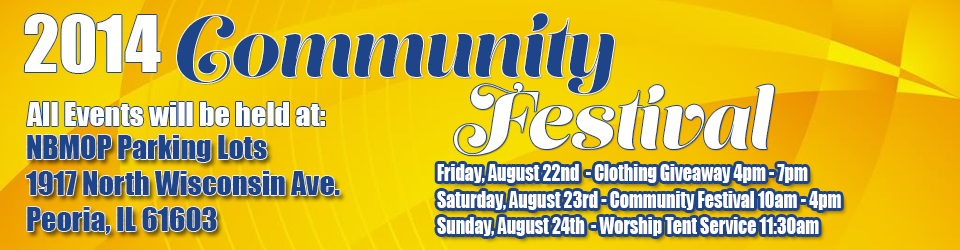
<style>
.page{position:relative;width:960px;height:250px}
.page>*{position:absolute;margin:0}
.t1{font:72px "Impact";color:#ffffff}
.t2{font:80px "LustScript";color:#1e4489}
.t3{font:80px "LustScript";color:#ffffff}
.t4{font:30px "Impact";color:#ffffff}
.t5{font:30px "Impact";color:#1e4489}
.t6{font:22px "Impact";color:#ffffff;scale:0.82 1}
</style>
<div class="page">
<p class="t1" style="left:24px;top:14px;width:137px;height:59px">2014</p>
<p class="t2" style="left:177px;top:13px;width:437px;height:81px">Community</p>
<p class="t3" style="left:454px;top:83px;width:320px;height:72px">Festival</p>
<p class="t4" style="left:26px;top:102px;width:299px;height:24px">All Events will be held at:</p>
<p class="t5" style="left:26px;top:135px;width:314px;height:99px">NBMOP Parking Lots<br>1917 North Wisconsin Ave.<br>Peoria, IL 61603</p>
<p class="t6" style="left:437px;top:164px;width:404px;height:72px">Friday, August 22nd  - Clothing Giveaway 4pm - 7pm<br>Saturday, August 23rd - Community Festival 10am - 4pm<br>Sunday, August 24th  - Worship Tent Service 11:30am</p>
</div>
